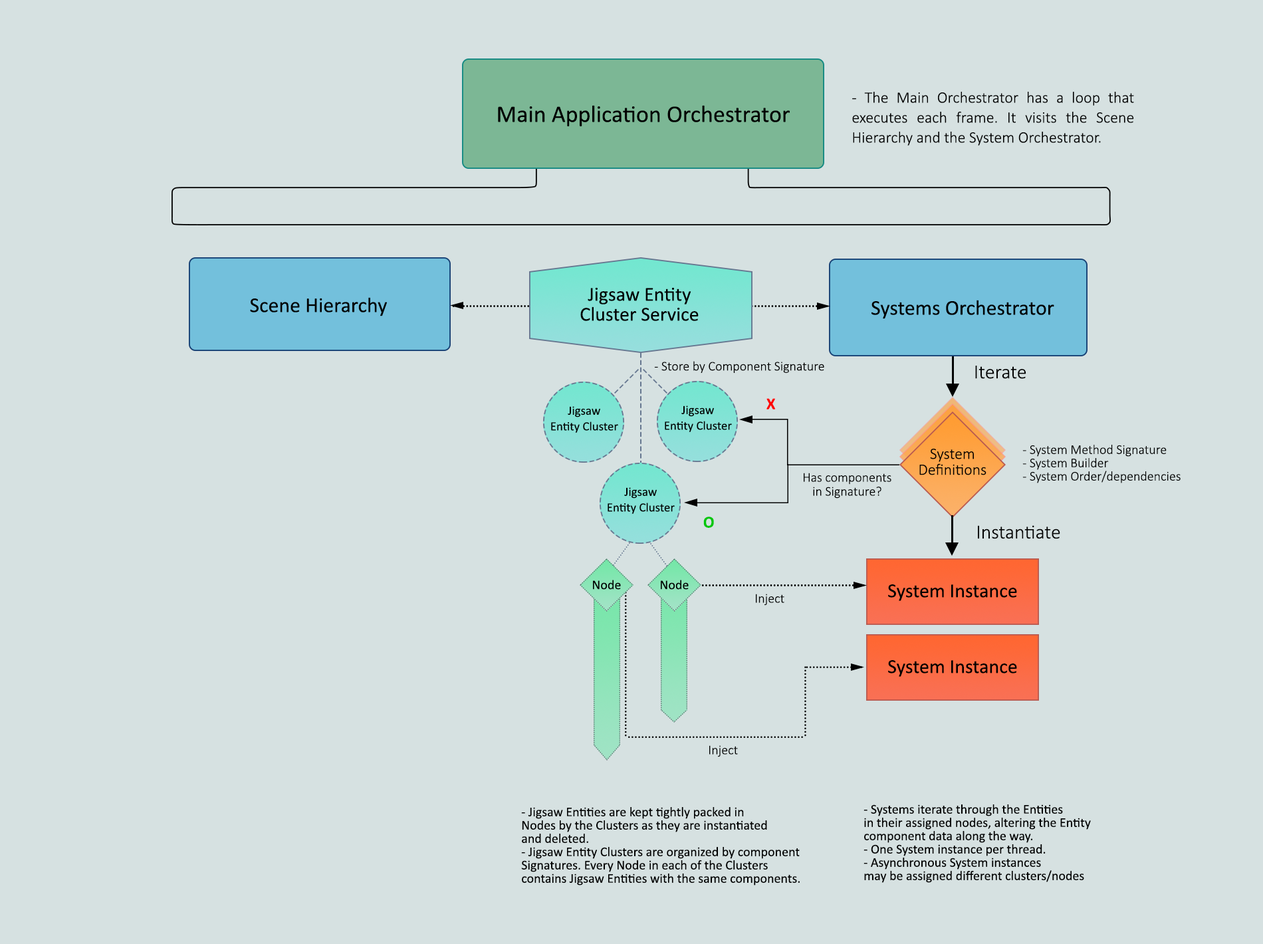
<style>
.page{position:relative;width:1263px;height:944px;background:#d6e1e1}
.page>*{position:absolute;margin:0}
.t1{font:16px/19.9px "Calibri-Light";color:#000000}
.t2{font:23.9px "Calibri";color:#000000}
.t3{font:19.9px/19.9px "Calibri";color:#000000}
.t4{font:21.2px "Calibri";color:#000000}
.t5{font:13.3px "Calibri-Light";color:#000000}
.t6{font:19.9px "Calibri-Light";color:#000000}
.t7{font:16.6px "Calibri-Bold";color:#ff0000}
.t8{font:12.5px/15.7px "Calibri";color:#000000}
.t9{font:15.9px/15.9px "Calibri-Light";color:#000000}
.t10{font:13.3px/13.3px "Calibri-Light";color:#000000}
.t11{font:13.3px/14px "Calibri-Light";color:#000000}
.t12{font:16.6px "Calibri-Bold";color:#00c709}
.t13{font:13.3px "Calibri";color:#000000}
.t14{font:19.9px "Calibri";color:#000000}
.t15{font:13.3px/13.3px "Calibri";color:#000000}
</style>
<div class="page">
<p class="t1" style="left:852px;top:92px;width:282px;height:54px;text-align:justify">- The Main Orchestrator has a loop that executes each frame. It visits the Scene Hierarchy and the System Orchestrator.</p>
<p class="t2" style="left:498px;top:105px;width:292px;height:21px">Main Application Orchestrator</p>
<p class="t3" style="left:580px;top:287px;width:119px;height:34px;text-align:center">Jigsaw Entity <br>Cluster Service</p>
<p class="t4" style="left:250px;top:297px;width:137px;height:19px">Scene Hierarchy</p>
<p class="t4" style="left:872px;top:300px;width:182px;height:19px">Systems Orchestrator</p>
<p class="t5" style="left:654px;top:361px;width:170px;height:12px">- Store by Component Signature</p>
<p class="t6" style="left:975px;top:366px;width:51px;height:13px">Iterate</p>
<p class="t7" style="left:767px;top:398px;width:9px;height:12px">X</p>
<p class="t8" style="left:551px;top:406px;width:67px;height:27px;text-align:center">Jigsaw Entity Cluster</p>
<p class="t8" style="left:665px;top:406px;width:67px;height:26px;text-align:center">Jigsaw Entity Cluster</p>
<p class="t9" style="left:919px;top:448px;width:68px;height:27px;text-align:center">System<br>Definitions</p>
<p class="t10" style="left:1022px;top:445px;width:159px;height:38px">- System Method Signature<br>- System Builder<br>- System Order/dependencies</p>
<p class="t11" style="left:804px;top:473px;width:88px;height:26px;text-align:center">Has components<br>in Signature?</p>
<p class="t8" style="left:608px;top:487px;width:67px;height:27px;text-align:center">Jigsaw Entity Cluster</p>
<p class="t12" style="left:703px;top:517px;width:11px;height:11px">O</p>
<p class="t6" style="left:978px;top:525px;width:82px;height:14px">Instantiate</p>
<p class="t13" style="left:593px;top:580px;width:28px;height:10px">Node</p>
<p class="t13" style="left:661px;top:580px;width:28px;height:10px">Node</p>
<p class="t5" style="left:756px;top:594px;width:28px;height:12px">Inject</p>
<p class="t14" style="left:888px;top:584px;width:129px;height:17px">System Instance</p>
<p class="t14" style="left:888px;top:660px;width:129px;height:17px">System Instance</p>
<p class="t5" style="left:709px;top:745px;width:29px;height:12px">Inject</p>
<p class="t15" style="left:521px;top:807px;width:279px;height:79px">- Jigsaw Entities are kept tightly packed in<br>Nodes by the Clusters as they are instantiated<br>and deleted.<br>- Jigsaw Entity Clusters are organized by component<br>Signatures. Every Node in each of the Clusters <br>contains Jigsaw Entities with the same components.</p>
<p class="t15" style="left:864px;top:804px;width:227px;height:79px">- Systems iterate through the Entities <br>in their assigned nodes, altering the Entity<br>component data along the way.<br>- One System instance per thread.<br>- Asynchronous System instances<br>may be assigned different clusters/nodes</p>
</div>
